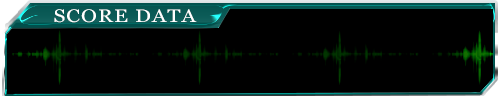
<style>
.page{position:relative;width:500px;height:96px;background:#000000}
.page>*{position:absolute;margin:0}
.t1{font:18.1px "Vani";letter-spacing:0.05em;color:#ffffff;scale:1.17 1}
</style>
<div class="page">
<p class="t1" style="left:54px;top:9px;width:143px;height:14px">SCORE DATA</p>
</div>
